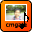
<style>
.page{position:relative;width:32px;height:32px}
.page>*{position:absolute;margin:0}
.t1{font:30px "ö¶y";color:#000000}
.t2{font:6px "LucidaSansUnicode";color:#0f0400}
</style>
<div class="page">
<p class="t1" style="left:20px;top:12px;width:9px;height:17px">♪</p>
<p class="t2" style="left:6px;top:22px;width:21px;height:6px">cmgate</p>
</div>
